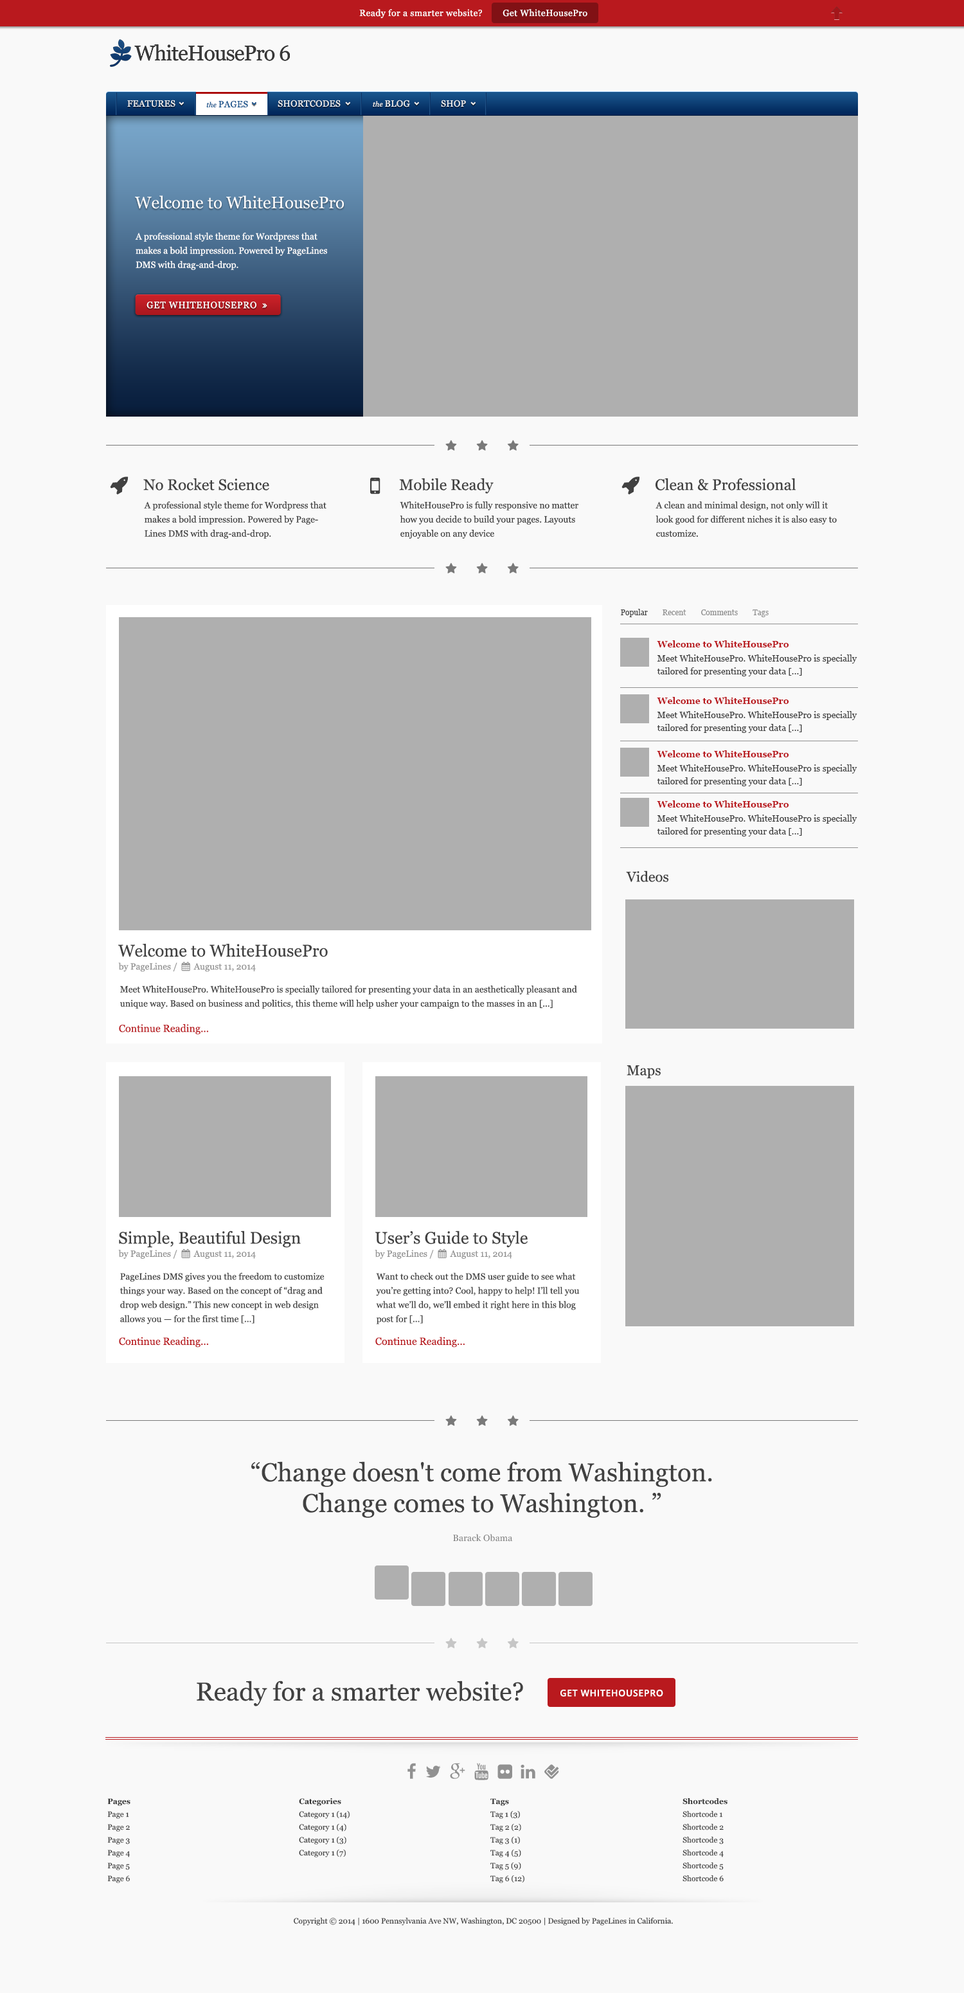
<style>
.page{position:relative;width:964px;height:1993px;background:#f9f9f9}
.page>*{position:absolute;margin:0}
.t1{font:9px "Georgia";letter-spacing:0.033em;color:#ffffff}
.t2{font:9px "Georgia";letter-spacing:0.02em;color:#ededed;text-transform:uppercase}
.t3{font:7.1px "Georgia-Italic";letter-spacing:0.02em;color:#ededed}
.t4{font:9px "Georgia";letter-spacing:0.02em;color:#0f4f89;text-transform:uppercase}
.t5{font:7.1px "Georgia-Italic";letter-spacing:0.02em;color:#0f4f89}
.t6{font:16.7px "Georgia";color:#ffffff}
.t7{font:9px/14.2px "Georgia";color:#ffffff}
.t8{font:15.4px "Georgia";color:#414141}
.t9{font:9px/14.1px "Georgia";color:#414141}
.t10{font:7.7px "Georgia";color:#919191}
.t11{font:7.7px "Georgia";color:#414141}
.t12{font:9px "Georgia-Bold";color:#b9191e}
.t13{font:9px/12.9px "Georgia";color:#414141}
.t14{font:14.1px "Georgia";color:#414141}
.t15{font:16.7px "Georgia";color:#414141}
.t16{font:10.3px "Georgia";color:#b9191e}
.t17{font:25.7px/30.8px "Georgia";color:#414141}
.t18{font:9px "Georgia";letter-spacing:0.013em;color:#797979}
.t19{font:25.7px "Georgia";color:#414141}
.t20{font:9px "OpenSans-Semibold";letter-spacing:0.05em;color:#ffffff;text-transform:uppercase}
.t21{font:7.7px/12.8px "Georgia";color:#333333}
.t22{font:7.7px/12.8px "Georgia-Bold";color:#333333}
.t23{font:7.7px "Georgia";color:#333333}
</style>
<div class="page">
<p class="t1" style="left:359px;top:9px;width:123px;height:10px">Ready for a smarter website?</p>
<p class="t1" style="left:503px;top:9px;width:85px;height:8px">Get WhiteHousePro</p>
<p class="t2" style="left:127px;top:100px;width:339px;height:7px">Features     <span class="t3">the </span>PAGES      Shortcodes       <span class="t3">the </span>Blog        Shop</p>
<p class="t4" style="left:206px;top:100px;width:42px;height:8px"><span class="t5">the </span>PAGES</p>
<p class="t6" style="left:135px;top:195px;width:209px;height:14px">Welcome to WhiteHousePro</p>
<p class="t7" style="left:135px;top:232px;width:192px;height:38px">A professional style theme for Wordpress that makes a bold impression. Powered by PageLines DMS with drag-and-drop.</p>
<p class="t8" style="left:143px;top:478px;width:126px;height:13px">No Rocket Science</p>
<p class="t8" style="left:399px;top:478px;width:95px;height:16px">Mobile Ready</p>
<p class="t8" style="left:656px;top:478px;width:140px;height:13px">Clean &amp; Professional</p>
<p class="t9" style="left:144px;top:501px;width:183px;height:38px">A professional style theme for Wordpress that makes a bold impression. Powered by PageLines DMS with drag-and-drop.</p>
<p class="t9" style="left:400px;top:501px;width:179px;height:38px">WhiteHousePro is fully responsive no matter how you decide to build your pages. Layouts enjoyable on any device</p>
<p class="t9" style="left:656px;top:501px;width:181px;height:36px">A clean and minimal design, not only will it look good for different niches it is also easy to customize.</p>
<p class="t10" style="left:621px;top:609px;width:148px;height:8px"><span class="t11">Popular  </span>      Recent        Comments        Tags</p>
<p class="t12" style="left:657px;top:640px;width:132px;height:7px">Welcome to WhiteHousePro</p>
<p class="t13" style="left:657px;top:654px;width:201px;height:22px">Meet WhiteHousePro. WhiteHousePro is specially tailored for presenting your data [...]</p>
<p class="t12" style="left:657px;top:697px;width:132px;height:7px">Welcome to WhiteHousePro</p>
<p class="t13" style="left:657px;top:711px;width:201px;height:22px">Meet WhiteHousePro. WhiteHousePro is specially tailored for presenting your data [...]</p>
<p class="t12" style="left:657px;top:750px;width:132px;height:7px">Welcome to WhiteHousePro</p>
<p class="t13" style="left:657px;top:764px;width:201px;height:22px">Meet WhiteHousePro. WhiteHousePro is specially tailored for presenting your data [...]</p>
<p class="t12" style="left:657px;top:800px;width:132px;height:7px">Welcome to WhiteHousePro</p>
<p class="t13" style="left:657px;top:815px;width:201px;height:21px">Meet WhiteHousePro. WhiteHousePro is specially tailored for presenting your data [...]</p>
<p class="t14" style="left:626px;top:870px;width:43px;height:12px">Videos</p>
<p class="t15" style="left:118px;top:944px;width:210px;height:13px">Welcome to WhiteHousePro</p>
<p class="t9" style="left:120px;top:986px;width:457px;height:23px">Meet WhiteHousePro. WhiteHousePro is specially tailored for presenting your data in an aesthetically pleasant and unique way. Based on business and politics, this theme will help usher your campaign to the masses in an [...]</p>
<p class="t16" style="left:119px;top:1024px;width:89px;height:10px">Continue Reading...</p>
<p class="t14" style="left:627px;top:1065px;width:34px;height:14px">Maps</p>
<p class="t15" style="left:119px;top:1230px;width:182px;height:18px">Simple, Beautiful Design</p>
<p class="t15" style="left:375px;top:1230px;width:153px;height:18px">User’s Guide to Style</p>
<p class="t9" style="left:120px;top:1272px;width:205px;height:52px">PageLines DMS gives you the freedom to customize things your way. Based on the concept of “drag and drop web design.” This new concept in web design allows you — for the first time [...]</p>
<p class="t9" style="left:376px;top:1272px;width:204px;height:52px">Want to check out the DMS user guide to see what you’re getting into? Cool, happy to help! I’ll tell you what we’ll do, we’ll embed it right here in this blog post for [...]</p>
<p class="t16" style="left:119px;top:1336px;width:89px;height:11px">Continue Reading...</p>
<p class="t16" style="left:375px;top:1336px;width:90px;height:11px">Continue Reading...</p>
<p class="t17" style="left:251px;top:1461px;width:461px;height:57px;text-align:center">“Change doesn't come from Washington.<br>Change comes to Washington. ”</p>
<p class="t18" style="left:453px;top:1534px;width:60px;height:8px">Barack Obama</p>
<p class="t19" style="left:197px;top:1680px;width:326px;height:26px">Ready for a smarter website?</p>
<p class="t20" style="left:561px;top:1689px;width:102px;height:8px">Get WhiteHousePro</p>
<p class="t21" style="left:107px;top:1798px;width:23px;height:85px"><span class="t22">Pages<br></span>Page 1<br>Page 2<br>Page 3<br>Page 4<br>Page 5<br>Page 6</p>
<p class="t21" style="left:299px;top:1797px;width:51px;height:60px"><span class="t22">Categories<br></span>Category 1 (14)<br>Category 1 (4)<br>Category 1 (3)<br>Category 1 (7)</p>
<p class="t21" style="left:491px;top:1798px;width:34px;height:85px"><span class="t22">Tags<br></span>Tag 1 (3)<br>Tag 2 (2)<br>Tag 3 (1)<br>Tag 4 (5)<br>Tag 5 (9)<br>Tag 6 (12)</p>
<p class="t21" style="left:683px;top:1797px;width:45px;height:85px"><span class="t22">Shortcodes<br></span>Shortcode 1<br>Shortcode 2<br>Shortcode 3<br>Shortcode 4<br>Shortcode 5<br>Shortcode 6</p>
<p class="t23" style="left:294px;top:1917px;width:379px;height:8px">Copyright © 2014 | 1600 Pennsylvania Ave NW, Washington, DC 20500 | Designed by PageLines in California.</p>
</div>
